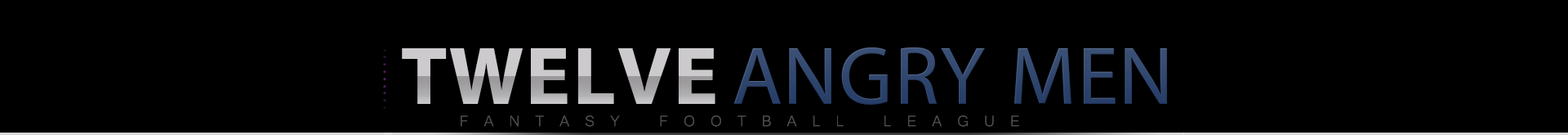
<style>
.page{position:relative;width:1568px;height:135px;background:#000000}
.page>*{position:absolute;margin:0}
.t1{font:116px "MyriadArabic-Bold";letter-spacing:0.015em}
.t2{font:116px "MyriadArabic-Regular";letter-spacing:0.011em;color:#31476f}
</style>
<div class="page">
<p class="t1" style="left:402px;top:47px;width:313px;height:57px">TWELVE</p>
<p class="t2" style="left:733px;top:47px;width:434px;height:58px">ANGRY MEN</p>
</div>
